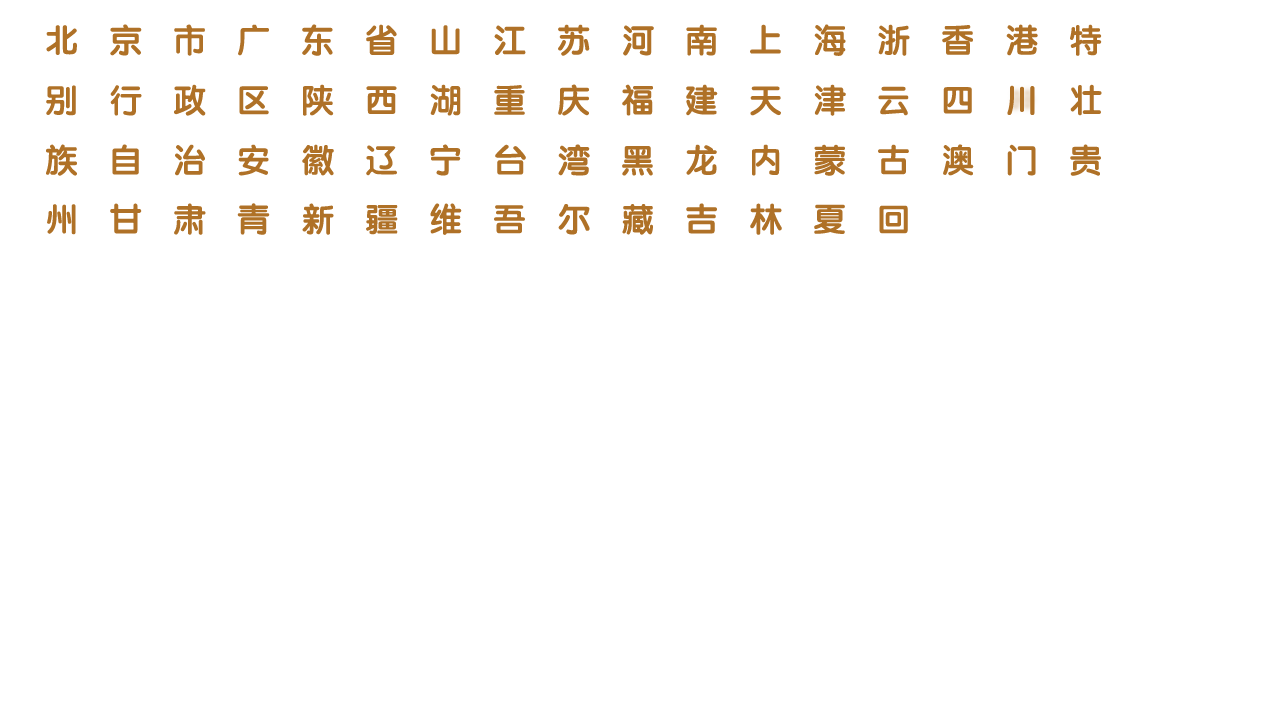
<style>
.page{position:relative;width:1280px;height:720px;background:#ffffff}
.page>*{position:absolute;margin:0}
.t1{font:32px "STYuanti-SC-Bold";letter-spacing:1em;color:#af7127}
</style>
<div class="page">
<p class="t1" style="left:46px;top:24px;width:1056px;height:32px">北京市广东省山江苏河南上海浙香港特</p>
<p class="t1" style="left:46px;top:84px;width:1056px;height:32px">别行政区陕西湖重庆福建天津云四川壮</p>
<p class="t1" style="left:46px;top:144px;width:1055px;height:32px">族自治安徽辽宁台湾黑龙内蒙古澳门贵</p>
<p class="t1" style="left:47px;top:203px;width:861px;height:32px">州甘肃青新疆维吾尔藏吉林夏回</p>
</div>
